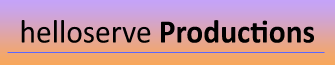
<style>
.page{position:relative;width:335px;height:65px}
.page>*{position:absolute;margin:0}
.t1{font:33px "Calibri-Bold";color:#000000;scale:0.95 1}
.t2{font:33px "Calibri";color:#000000;scale:0.95 1}
</style>
<div class="page">
<p class="t1" style="left:21px;top:20px;width:293px;height:23px"><span class="t2">helloserve </span>Productions</p>
</div>
